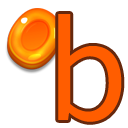
<style>
.page{position:relative;width:128px;height:128px;background:#ffffff}
.page>*{position:absolute;margin:0}
.t1{font:132.9px "SourceHanSansCN-Regular";color:#ff5d00}
</style>
<div class="page">
<p class="t1" style="left:58px;top:14px;width:64px;height:108px">b</p>
</div>
